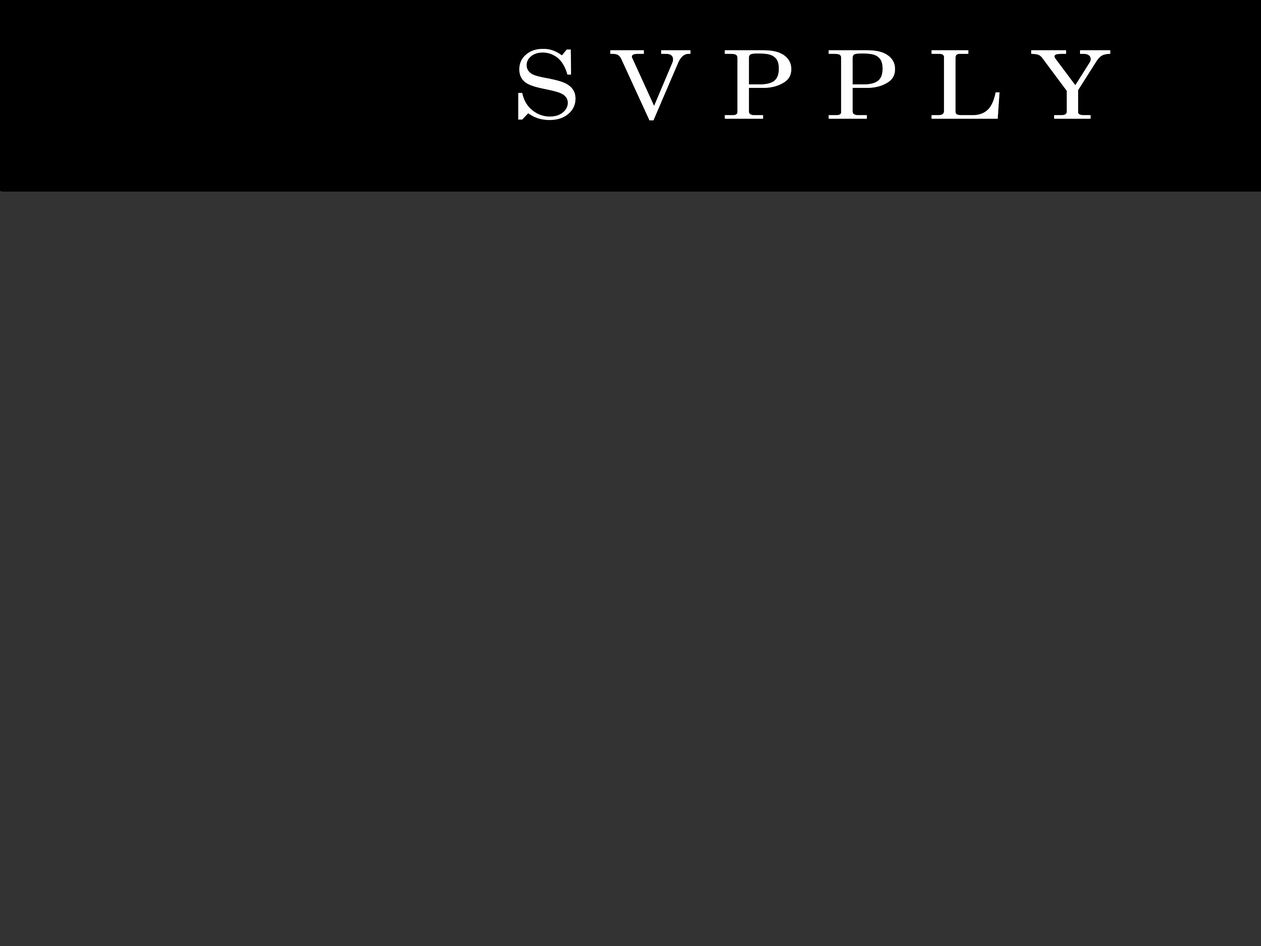
<style>
.page{position:relative;width:1261px;height:946px;background:#333333}
.page>*{position:absolute;margin:0}
.t1{font:94.5px "CenturySchoolbook";color:#ffffff;scale:1.16 1}
</style>
<div class="page">
<p class="t1" style="left:518px;top:49px;width:592px;height:71px">S V P P L Y</p>
</div>
